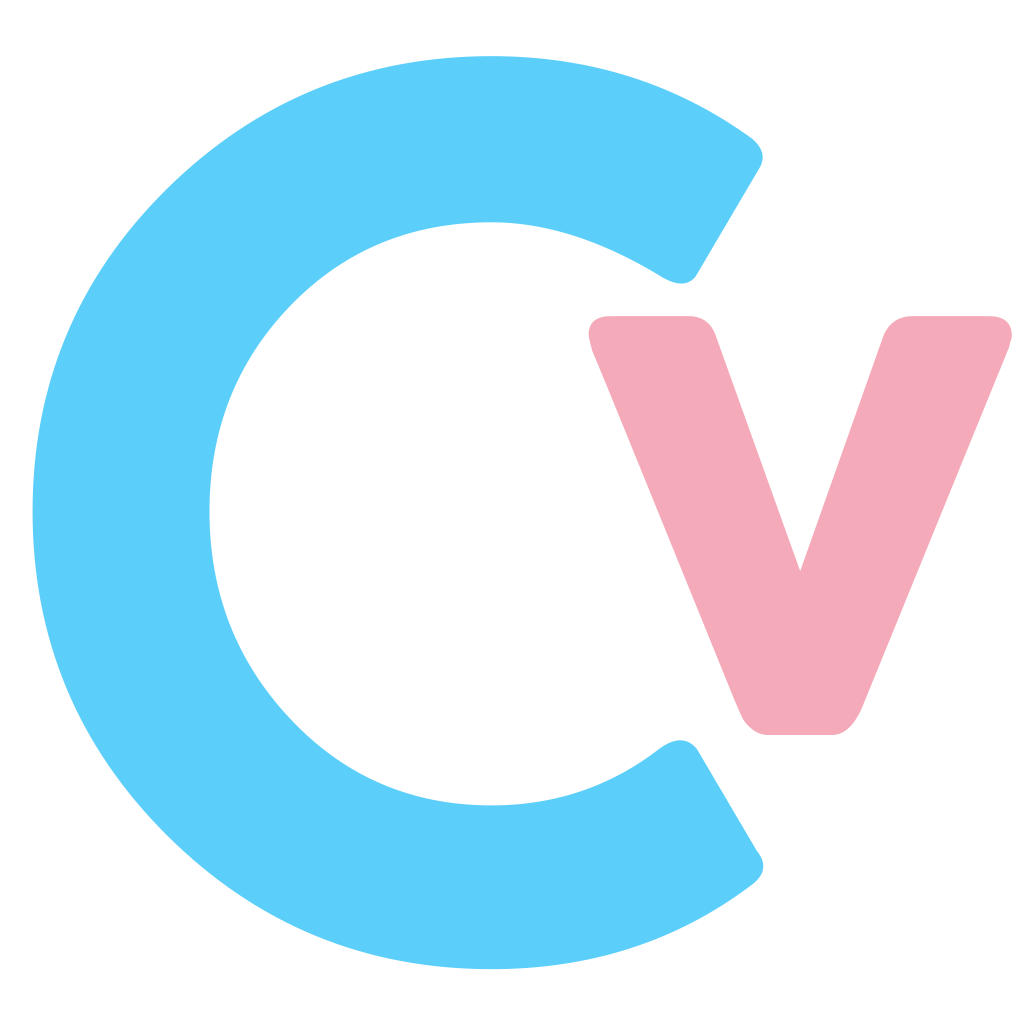
<style>
.page{position:relative;width:1024px;height:1024px;background:#ffffff}
.page>*{position:absolute;margin:0}
.t1{font:1194.7px "CocoGothic-Bold";color:#5bcffa}
.t2{font:853.3px "CocoGothic-Bold";color:#f5aab9}
</style>
<div class="page">
<p class="t1" style="left:32px;top:56px;width:732px;height:914px">C</p>
<p class="t2" style="left:588px;top:316px;width:424px;height:419px">v</p>
</div>
